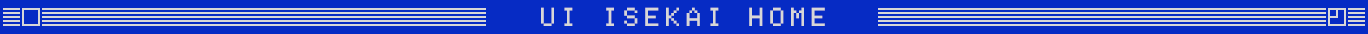
<style>
.page{position:relative;width:1368px;height:34px;background:#062bc4}
.page>*{position:absolute;margin:0}
.t1{font:20.8px "Apple";color:#d7d7d7}
</style>
<div class="page">
<p class="t1" style="left:541px;top:7px;width:284px;height:19px">UI ISEKAI HOME</p>
</div>
